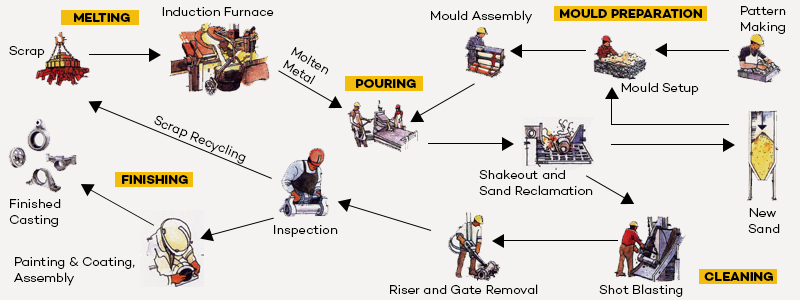
<style>
.page{position:relative;width:800px;height:300px;background:#f4f3f1}
.page>*{position:absolute;margin:0}
.t1{font:13px "Campton-LightDEMO";color:#000000}
.t2{font:13px "Campton-BoldDEMO";color:#000000}
</style>
<div class="page">
<p class="t1" style="left:741px;top:6px;width:45px;height:28px;text-align:center">Pattern<br>Making</p>
<p class="t2" style="left:74px;top:13px;width:56px;height:9px">MELTING</p>
<p class="t1" style="left:162px;top:7px;width:112px;height:9px">Induction Furnace</p>
<p class="t1" style="left:431px;top:10px;width:101px;height:14px">Mould Assembly</p>
<p class="t2" style="left:560px;top:9px;width:142px;height:9px">MOULD PREPARATION</p>
<p class="t1" style="left:9px;top:46px;width:36px;height:12px">Scrap</p>
<p class="t1" style="left:283px;top:47px;width:46px;height:37px;rotate:30deg">Molten<br>Metal</p>
<p class="t2" style="left:356px;top:79px;width:60px;height:9px">POURING</p>
<p class="t1" style="left:621px;top:82px;width:78px;height:13px">Mould Setup</p>
<p class="t1" style="left:154px;top:115px;width:92px;height:49px;rotate:23deg">Scrap Recycling</p>
<p class="t1" style="left:479px;top:169px;width:114px;height:26px">Shakeout and <br>Sand Reclamation</p>
<p class="t2" style="left:122px;top:175px;width:66px;height:9px">FINISHING</p>
<p class="t1" style="left:9px;top:199px;width:52px;height:28px">Finished <br>Casting</p>
<p class="t1" style="left:748px;top:208px;width:32px;height:25px;text-align:center">New <br>Sand</p>
<p class="t1" style="left:274px;top:225px;width:64px;height:12px">Inspection</p>
<p class="t1" style="left:14px;top:257px;width:121px;height:29px">Painting &amp; Coating, <br>Assembly</p>
<p class="t2" style="left:704px;top:272px;width:69px;height:9px">CLEANING</p>
<p class="t1" style="left:390px;top:284px;width:148px;height:10px">Riser and Gate Removal</p>
<p class="t1" style="left:599px;top:284px;width:84px;height:13px">Shot Blasting</p>
</div>
